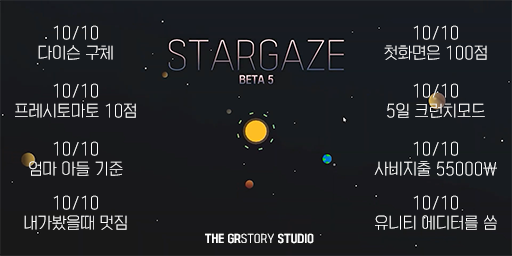
<style>
.page{position:relative;width:512px;height:256px}
.page>*{position:absolute;margin:0}
.t1{font:15px/20px "KoreanYNSJG2-R";color:#ffffff}
.t2{font:10px "KoreanYNSJG5-R";color:#ffffff}
.t3{font:10px "KoreanYNSJG3-R";color:#ffffff}
</style>
<div class="page">
<p class="t1" style="left:38px;top:25px;width:75px;height:35px;text-align:center">10/10<br>다이슨 구체</p>
<p class="t1" style="left:384px;top:25px;width:103px;height:35px;text-align:center">10/10<br>첫화면은 100점</p>
<p class="t1" style="left:15px;top:83px;width:121px;height:35px;text-align:center">10/10<br>프레시토마토 10점</p>
<p class="t1" style="left:387px;top:83px;width:98px;height:35px;text-align:center">10/10<br>5일 크런치모드</p>
<p class="t1" style="left:29px;top:141px;width:94px;height:35px;text-align:center">10/10<br>엄마 아들 기준</p>
<p class="t1" style="left:374px;top:141px;width:123px;height:35px;text-align:center">10/10<br>사비지출 55000₩</p>
<p class="t1" style="left:24px;top:195px;width:103px;height:35px;text-align:center">10/10<br>내가봤을때 멋짐</p>
<p class="t1" style="left:375px;top:195px;width:122px;height:35px;text-align:center">10/10<br>유니티 에디터를 씀</p>
<p class="t2" style="left:205px;top:233px;width:109px;height:11px">THE GR<span class="t3">STORY</span> STUDIO</p>
</div>
